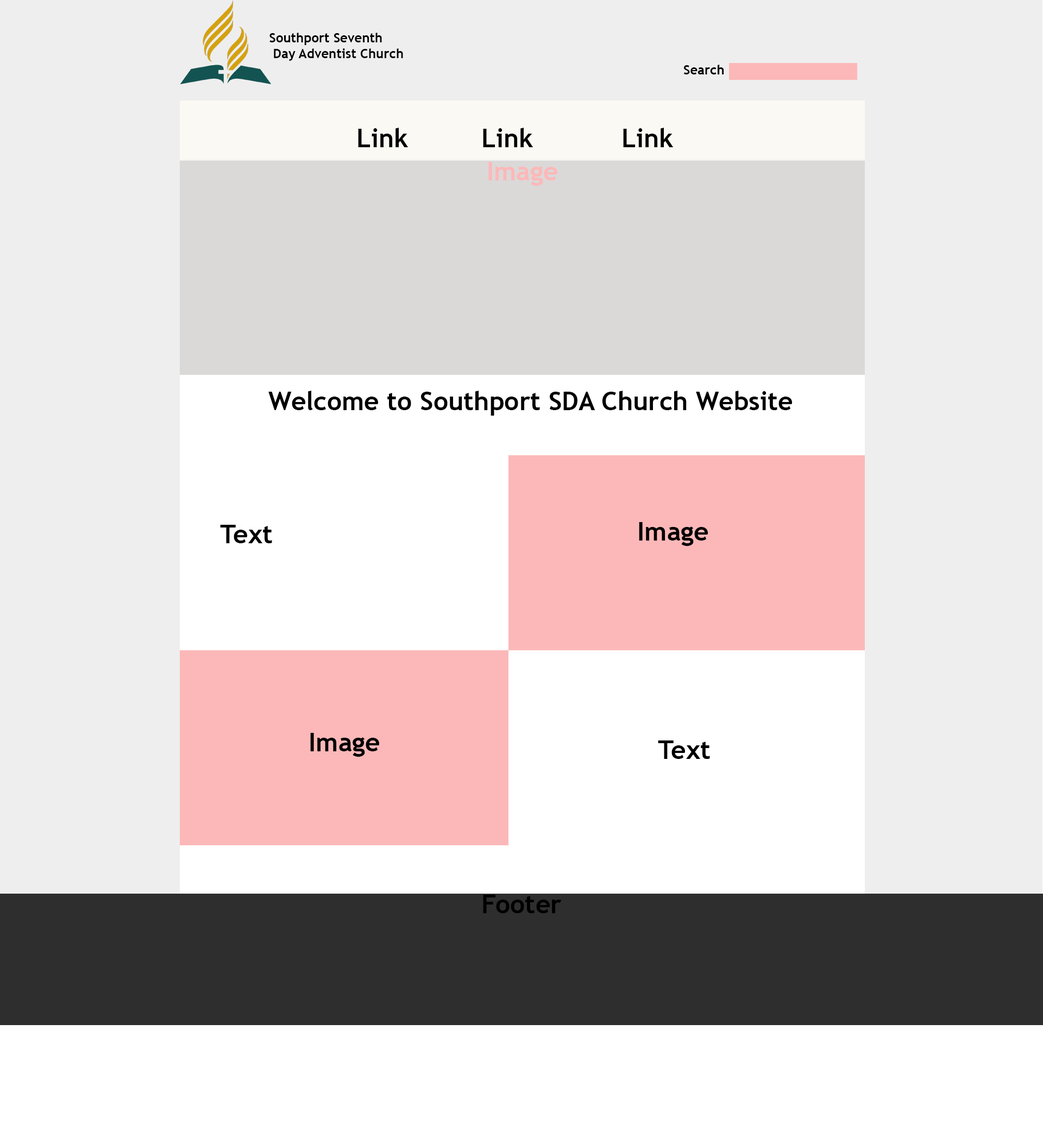
<style>
.page{position:relative;width:1043px;height:1143px;background:#efeeee}
.page>*{position:absolute;margin:0}
.t1{font:13px "TrebuchetMS-Bold";color:#000000}
.t2{font:26.1px "TrebuchetMS-Bold";color:#000000}
.t3{font:26.1px "TrebuchetMS-Bold";color:#fcb8b8}
</style>
<div class="page">
<p class="t1" style="left:269px;top:33px;width:134px;height:28px">Southport Seventh<br> Day Adventist Church</p>
<p class="t1" style="left:683px;top:65px;width:41px;height:9px">Search</p>
<p class="t2" style="left:358px;top:128px;width:51px;height:19px">Link</p>
<p class="t2" style="left:483px;top:128px;width:51px;height:19px">Link</p>
<p class="t2" style="left:623px;top:128px;width:51px;height:19px">Link</p>
<p class="t3" style="left:488px;top:162px;width:69px;height:24px">Image</p>
<p class="t2" style="left:268px;top:391px;width:524px;height:25px">Welcome to Southport SDA Church Website</p>
<p class="t2" style="left:220px;top:525px;width:52px;height:18px">Text</p>
<p class="t2" style="left:639px;top:522px;width:69px;height:24px">Image</p>
<p class="t2" style="left:310px;top:733px;width:69px;height:24px">Image</p>
<p class="t2" style="left:658px;top:741px;width:52px;height:18px">Text</p>
<p class="t2" style="left:483px;top:895px;width:78px;height:18px">Footer</p>
</div>
